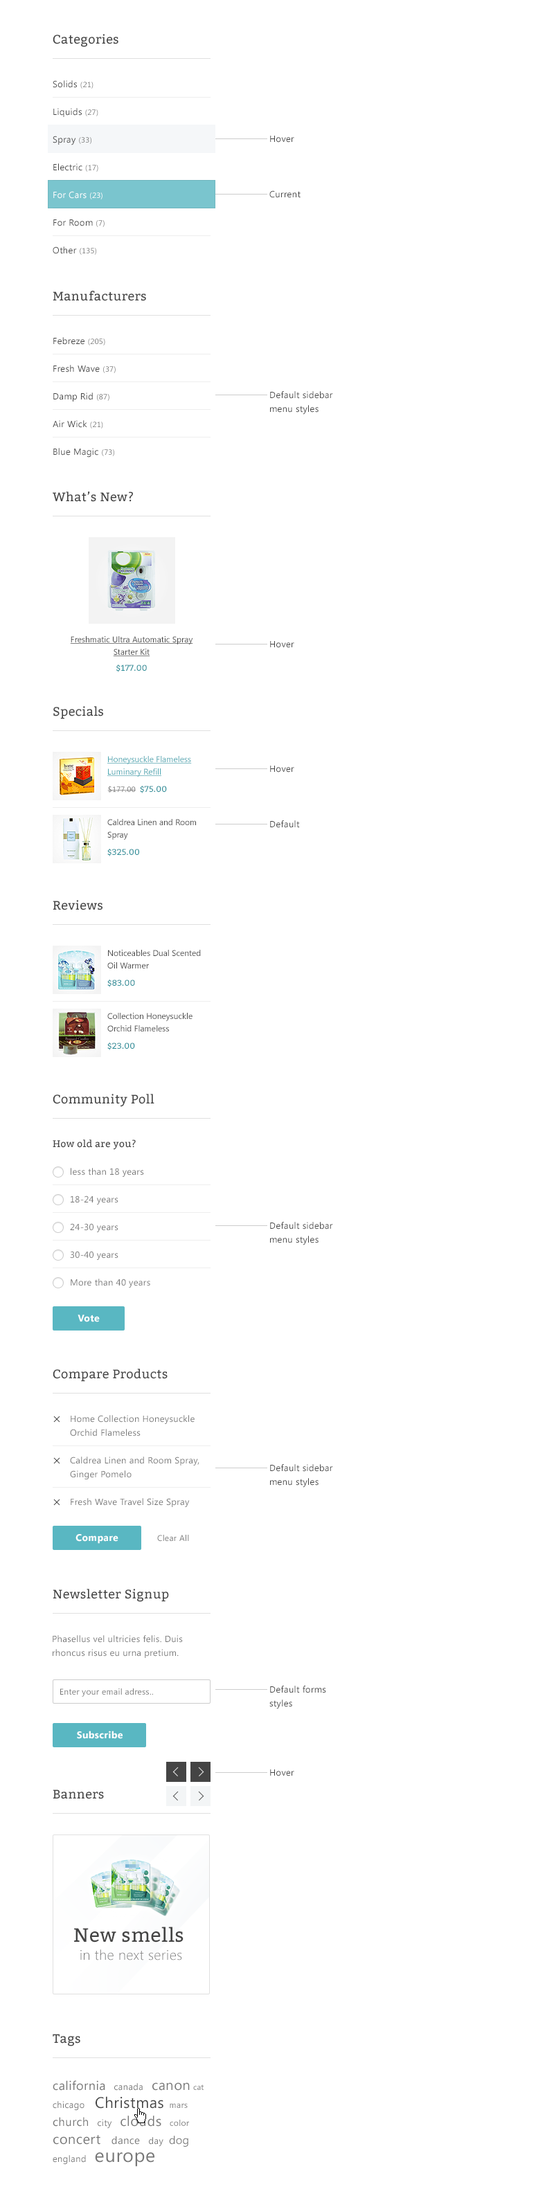
<style>
.page{position:relative;width:554px;height:2209px;background:#ffffff}
.page>*{position:absolute;margin:0}
.t1{font:12.5px "Bitter-Regular";letter-spacing:0.025em;color:#444444}
.t2{font:9px/27.7px "SegoeUI";letter-spacing:0.025em;color:#444444}
.t3{font:7.6px/27.7px "SegoeUI";letter-spacing:0.025em;color:#777777}
.t4{font:9px/27.7px "SegoeUI";letter-spacing:0.025em;color:#ffffff}
.t5{font:7.6px/27.7px "SegoeUI";letter-spacing:0.025em;color:#ffffff}
.t6{font:9px "SegoeUI";letter-spacing:0.025em;color:#444444}
.t7{font:9px/13.8px "SegoeUI";letter-spacing:0.025em;color:#444444}
.t8{font:8.3px/12.5px "SegoeUI";color:#444444;text-decoration:underline}
.t9{font:8.3px "Bitter-Regular";letter-spacing:0.025em;color:#2e8f9a}
.t10{font:8.3px/12.5px "SegoeUI";color:#4ba6b1;text-decoration:underline}
.t11{font:7.6px "SegoeUI";letter-spacing:0.025em;color:#777777}
.t12{font:8.3px/12.5px "SegoeUI";color:#444444}
.t13{font:9.7px "Bitter-Regular";letter-spacing:0.025em;color:#444444}
.t14{font:9px/27.7px "SegoeUI";letter-spacing:0.025em;color:#777777}
.t15{font:9.7px "SegoeUI-Bold";letter-spacing:0.025em;color:#fefefe}
.t16{font:9px/13.8px "SegoeUI";letter-spacing:0.025em;color:#777777}
.t17{font:8.3px "SegoeUI";letter-spacing:0.025em;color:#777777}
.t18{font:13.8px/18px "SegoeUI-Light";letter-spacing:0.025em;color:#777777}
.t19{font:19.4px/18px "Bitter-Regular";letter-spacing:0.025em;color:#444444}
.t20{font:12.5px/18px "SegoeUI";letter-spacing:0.025em;color:#777777}
.t21{font:9px/18px "SegoeUI";letter-spacing:0.025em;color:#777777}
.t22{font:13.8px/18px "SegoeUI";letter-spacing:0.025em;color:#777777}
.t23{font:7.6px/18px "SegoeUI";letter-spacing:0.025em;color:#777777}
.t24{font:15.2px/18px "SegoeUI";letter-spacing:0.025em;color:#444444}
.t25{font:8.3px/18px "SegoeUI";letter-spacing:0.025em;color:#777777}
.t26{font:11.8px/18px "SegoeUI";letter-spacing:0.025em;color:#777777}
.t27{font:10.4px/18px "SegoeUI";letter-spacing:0.025em;color:#777777}
.t28{font:11.1px/18px "SegoeUI";letter-spacing:0.025em;color:#777777}
.t29{font:18.7px/18px "SegoeUI";letter-spacing:0.025em;color:#777777}
</style>
<div class="page">
<p class="t1" style="left:53px;top:34px;width:65px;height:13px">Categories</p>
<p class="t2" style="left:53px;top:80px;width:52px;height:175px">Solids <span class="t3">(21)<br></span>Liquids <span class="t3">(27)<br></span>Spray <span class="t3">(33)<br></span>Electric <span class="t3">(17)<br></span><span class="t4">For Cars </span><span class="t5">(23)<br></span>For Room <span class="t3">(7)<br></span>Other <span class="t3">(135)</span></p>
<p class="t6" style="left:270px;top:136px;width:24px;height:7px">Hover</p>
<p class="t6" style="left:269px;top:190px;width:31px;height:8px">Current</p>
<p class="t1" style="left:53px;top:291px;width:93px;height:10px">Manufacturers</p>
<p class="t2" style="left:53px;top:337px;width:63px;height:121px">Febreze <span class="t3">(205)<br></span>Fresh Wave <span class="t3">(37)<br></span>Damp Rid <span class="t3">(87)<br></span>Air Wick <span class="t3">(21)<br></span>Blue Magic <span class="t3">(73)</span></p>
<p class="t7" style="left:270px;top:391px;width:63px;height:24px">Default sidebar <br>menu styles</p>
<p class="t1" style="left:53px;top:491px;width:80px;height:11px">What’s New?</p>
<p class="t8" style="left:70px;top:636px;width:123px;height:20px;text-align:center">Freshmatic Ultra Automatic Spray Starter Kit</p>
<p class="t6" style="left:270px;top:641px;width:24px;height:7px">Hover</p>
<p class="t9" style="left:116px;top:665px;width:31px;height:7px">$177.00</p>
<p class="t1" style="left:53px;top:706px;width:50px;height:13px">Specials</p>
<p class="t10" style="left:107px;top:756px;width:85px;height:21px">Honeysuckle Flameless Luminary Refill</p>
<p class="t6" style="left:270px;top:766px;width:24px;height:7px">Hover</p>
<p class="t11" style="left:107px;top:786px;width:29px;height:7px">$177.00</p>
<p class="t9" style="left:140px;top:786px;width:27px;height:7px">$75.00</p>
<p class="t12" style="left:107px;top:819px;width:89px;height:21px">Caldrea Linen and Room Spray</p>
<p class="t6" style="left:270px;top:820px;width:30px;height:8px">Default</p>
<p class="t9" style="left:107px;top:849px;width:32px;height:7px">$325.00</p>
<p class="t1" style="left:53px;top:900px;width:49px;height:10px">Reviews</p>
<p class="t12" style="left:107px;top:950px;width:94px;height:18px">Noticeables Dual Scented Oil Warmer</p>
<p class="t9" style="left:107px;top:979px;width:28px;height:8px">$83.00</p>
<p class="t12" style="left:107px;top:1013px;width:85px;height:18px">Collection Honeysuckle Orchid Flameless</p>
<p class="t9" style="left:107px;top:1042px;width:28px;height:8px">$23.00</p>
<p class="t1" style="left:53px;top:1094px;width:101px;height:13px">Community Poll</p>
<p class="t13" style="left:53px;top:1139px;width:83px;height:11px">How old are you?</p>
<p class="t14" style="left:70px;top:1168px;width:80px;height:120px">less than 18 years<br>18-24 years<br>24-30 years<br>30-40 years<br>More than 40 years</p>
<p class="t7" style="left:270px;top:1222px;width:63px;height:23px">Default sidebar <br>menu styles</p>
<p class="t15" style="left:78px;top:1315px;width:22px;height:7px">Vote</p>
<p class="t1" style="left:53px;top:1369px;width:115px;height:13px">Compare Products</p>
<p class="t16" style="left:70px;top:1415px;width:129px;height:92px">Home Collection Honeysuckle <br>Orchid Flameless<br><br>Caldrea Linen and Room Spray, <br>Ginger Pomelo<br><br>Fresh Wave Travel Size Spray</p>
<p class="t7" style="left:270px;top:1464px;width:63px;height:24px">Default sidebar <br>menu styles</p>
<p class="t15" style="left:75px;top:1534px;width:43px;height:10px">Compare</p>
<p class="t17" style="left:157px;top:1535px;width:32px;height:7px">Clear All</p>
<p class="t1" style="left:53px;top:1589px;width:116px;height:13px">Newsletter Signup</p>
<p class="t16" style="left:53px;top:1635px;width:130px;height:23px">Phasellus vel ultricies felis. Duis <br>rhoncus risus eu urna pretium.</p>
<p class="t7" style="left:269px;top:1686px;width:57px;height:23px">Default forms <br>styles</p>
<p class="t17" style="left:60px;top:1688px;width:93px;height:9px">Enter your email adress..</p>
<p class="t15" style="left:77px;top:1731px;width:46px;height:8px">Subscribe</p>
<p class="t6" style="left:270px;top:1769px;width:24px;height:7px">Hover</p>
<p class="t1" style="left:53px;top:1789px;width:51px;height:10px">Banners</p>
<p class="t18" style="left:74px;top:1926px;width:109px;height:34px;text-align:center"><span class="t19">New smells <br></span>in the next series</p>
<p class="t1" style="left:53px;top:2034px;width:27px;height:12px">Tags</p>
<p class="t20" style="left:53px;top:2080px;width:151px;height:87px">california<span class="t21">   canada   </span><span class="t22">canon </span><span class="t23">cat   </span><span class="t21">chicago  </span><span class="t24">Christmas </span><span class="t25">mars   </span><span class="t26">church</span><span class="t21">   city   </span><span class="t22">clouds  </span><span class="t25"> color   </span><span class="t22">concert   </span><span class="t27">dance </span><span class="t21">  day  </span><span class="t28">dog </span><span class="t21">  england   </span><span class="t29">europe</span></p>
</div>
